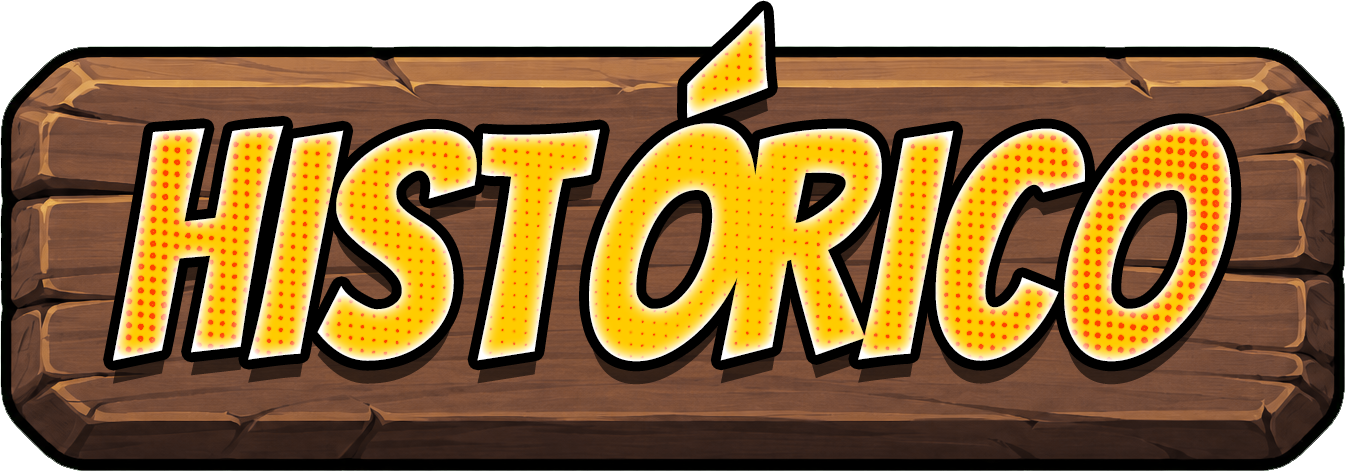
<style>
.page{position:relative;width:1345px;height:471px}
.page>*{position:absolute;margin:0}
.t1{font:316.1px "Bangers-Regular"}
</style>
<div class="page">
<p class="t1" style="left:113px;top:10px;width:1119px;height:352px">HISTÓRICO</p>
</div>
